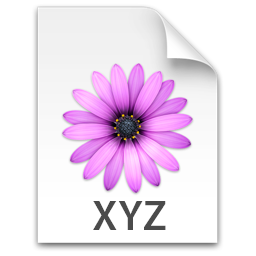
<style>
.page{position:relative;width:256px;height:256px;background:#ffffff}
.page>*{position:absolute;margin:0}
.t1{font:42.1px "MyriadPro-Semibold";letter-spacing:0.02em;color:#4b4b4b}
</style>
<div class="page">
<p class="t1" style="left:93px;top:201px;width:73px;height:29px">XYZ</p>
</div>
